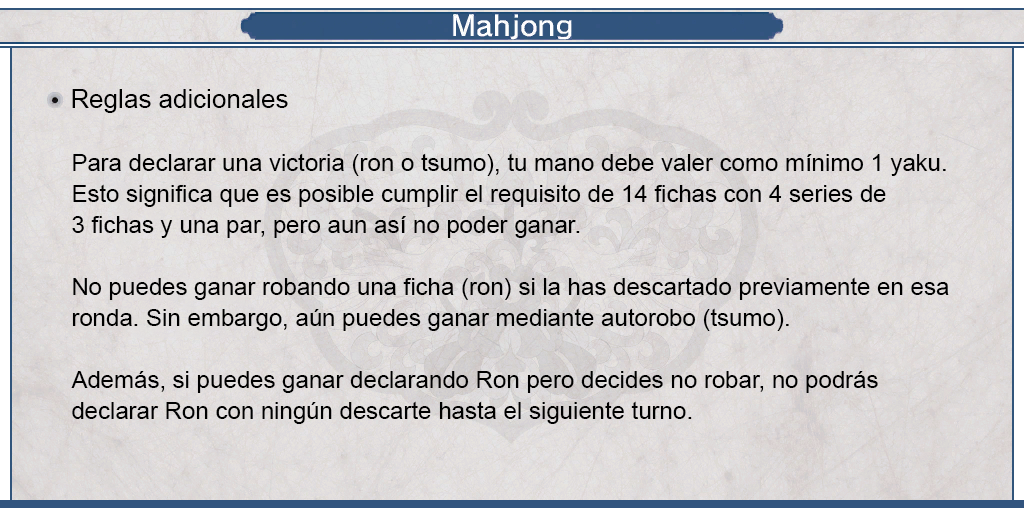
<style>
.page{position:relative;width:1024px;height:512px}
.page>*{position:absolute;margin:0}
.t1{font:26px "ArialMT";color:#000000}
.t2{font:24px/31px "ArialMT";color:#000000}
</style>
<div class="page">
<p class="t1" style="left:72px;top:89px;width:216px;height:24px">Reglas adicionales</p>
<p class="t2" style="left:71px;top:153px;width:878px;height:271px;text-align:justify">Para declarar una victoria (ron o tsumo), tu mano debe valer como mínimo 1 yaku.<br>Esto significa que es posible cumplir el requisito de 14 fichas con 4 series de<br>3 fichas y una par, pero aun así no poder ganar.<br><br>No puedes ganar robando una ficha (ron) si la has descartado previamente en esa<br>ronda. Sin embargo, aún puedes ganar mediante autorobo (tsumo).<br><br>Además, si puedes ganar declarando Ron pero decides no robar, no podrás<br>declarar Ron con ningún descarte hasta el siguiente turno.</p>
</div>
